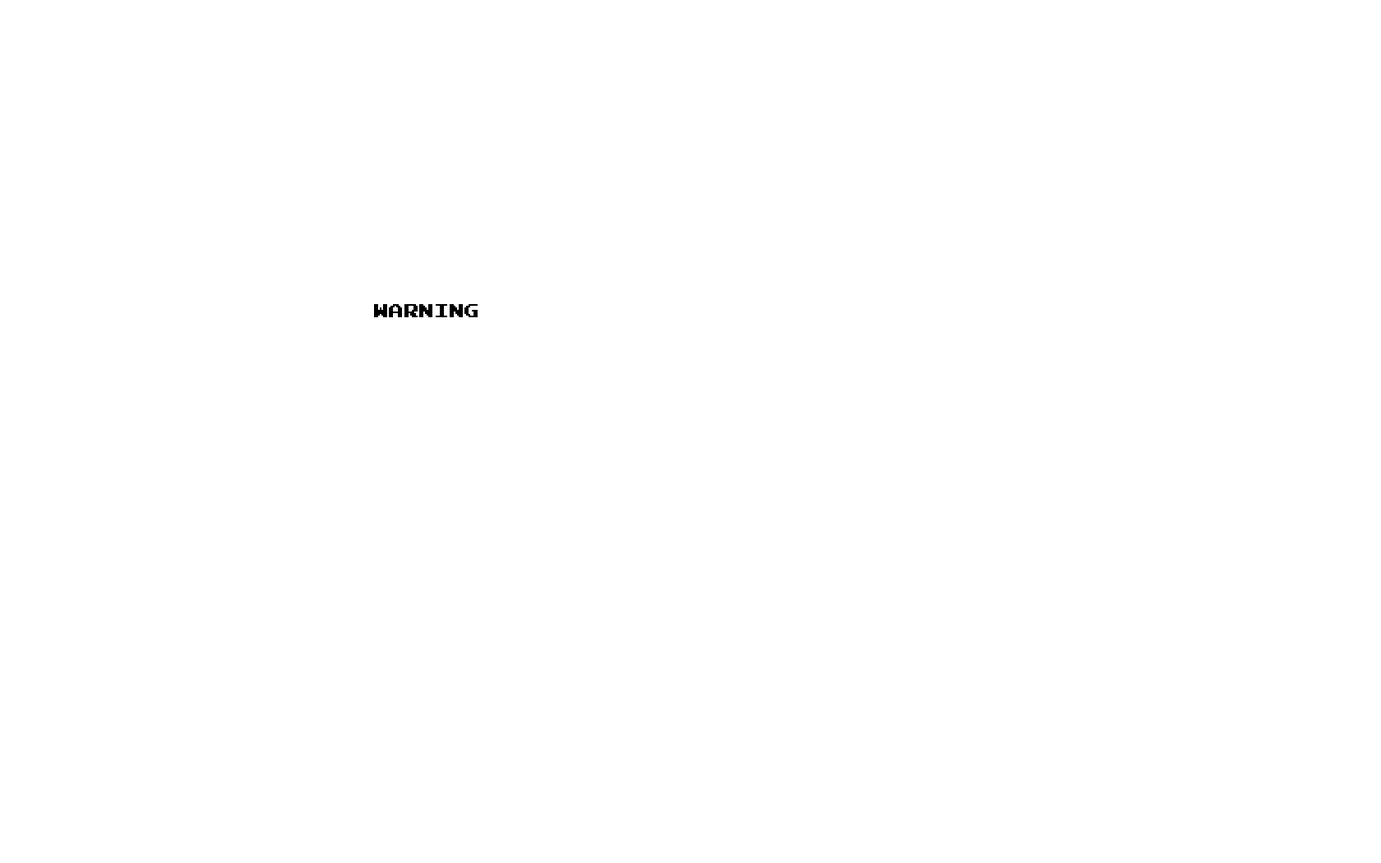
<style>
.page{position:relative;width:1381px;height:863px;background:#ffffff}
.page>*{position:absolute;margin:0}
.t1{font:14.8px "Emulogic";letter-spacing:0.018em;color:#000000}
</style>
<div class="page">
<p class="t1" style="left:374px;top:304px;width:104px;height:13px">WARNING</p>
</div>
